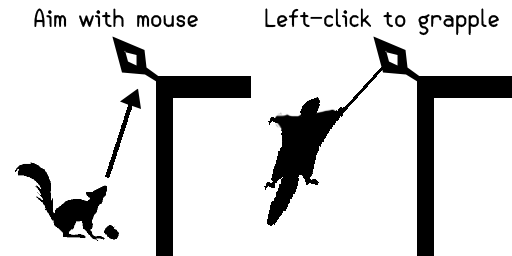
<style>
.page{position:relative;width:512px;height:256px;background:#ffffff}
.page>*{position:absolute;margin:0}
.t1{font:24px "SemiCasual";color:#000000}
</style>
<div class="page">
<p class="t1" style="left:34px;top:8px;width:164px;height:20px">Aim with mouse</p>
<p class="t1" style="left:265px;top:8px;width:234px;height:28px">Left-click to grapple</p>
</div>
